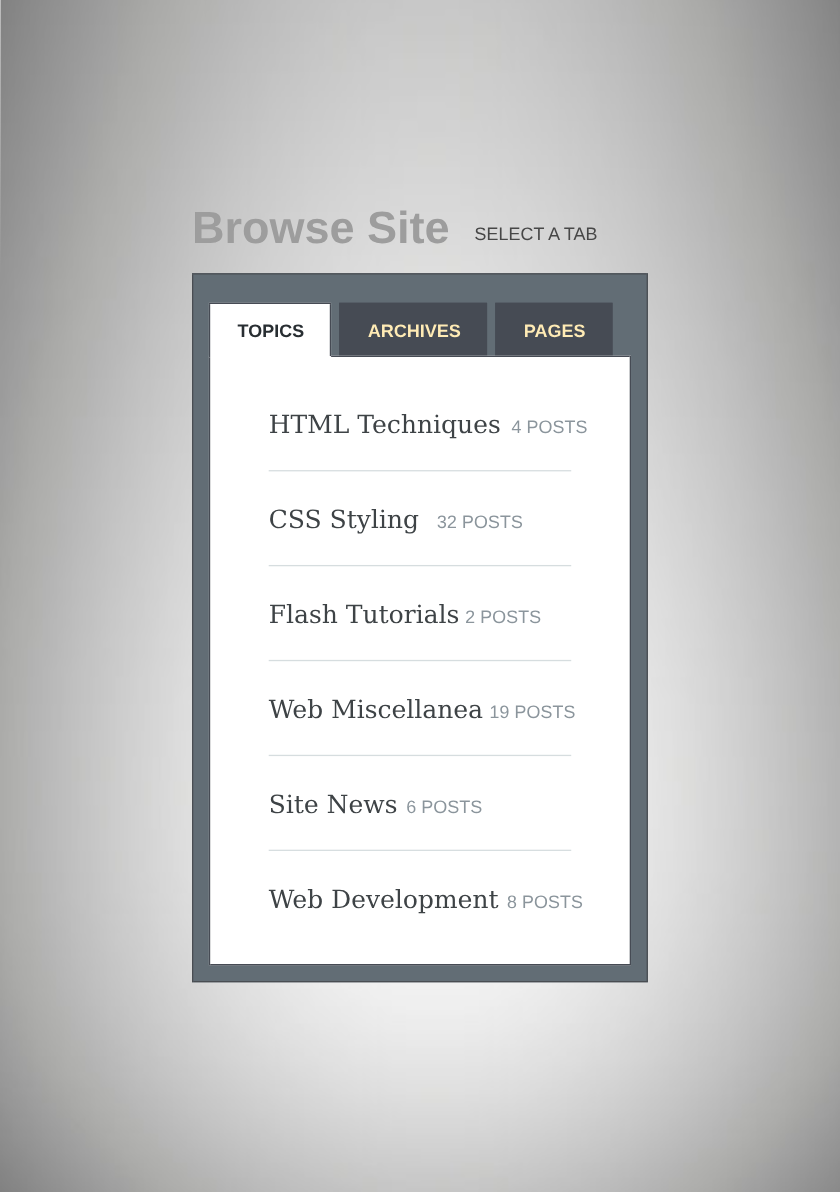
<style>
.page{position:relative;width:840px;height:1192px;background:#ffffff}
.page>*{position:absolute;margin:0}
.t1{font:45px "LiberationSans-Bold";color:#9d9d9d}
.t2{font:18px "LiberationSans";color:#474747}
.t3{font:18px "LiberationSans-Bold";color:#282e32}
.t4{font:18px "LiberationSans-Bold";color:#ffebb5}
.t5{font:25px "NotoSerif-Regular";color:#3e4346}
.t6{font:18px "LiberationSans";color:#8b959c}
</style>
<div class="page">
<p class="t1" style="left:195px;top:210px;width:254px;height:34px">Browse Site</p>
<p class="t2" style="left:475px;top:227px;width:122px;height:14px">SELECT A TAB</p>
<p class="t3" style="left:237px;top:324px;width:67px;height:14px">TOPICS</p>
<p class="t4" style="left:368px;top:324px;width:93px;height:14px">ARCHIVES</p>
<p class="t4" style="left:525px;top:324px;width:60px;height:14px">PAGES</p>
<p class="t5" style="left:270px;top:414px;width:230px;height:25px">HTML Techniques</p>
<p class="t6" style="left:511px;top:420px;width:76px;height:14px">4 POSTS</p>
<p class="t5" style="left:270px;top:509px;width:149px;height:25px">CSS Styling</p>
<p class="t6" style="left:437px;top:515px;width:86px;height:14px">32 POSTS</p>
<p class="t5" style="left:270px;top:604px;width:189px;height:20px">Flash Tutorials</p>
<p class="t6" style="left:466px;top:610px;width:75px;height:14px">2 POSTS</p>
<p class="t5" style="left:268px;top:699px;width:215px;height:20px">Web Miscellanea</p>
<p class="t6" style="left:490px;top:705px;width:85px;height:14px">19 POSTS</p>
<p class="t5" style="left:270px;top:794px;width:127px;height:20px">Site News</p>
<p class="t6" style="left:407px;top:800px;width:75px;height:14px">6 POSTS</p>
<p class="t5" style="left:268px;top:889px;width:231px;height:25px">Web Development</p>
<p class="t6" style="left:507px;top:895px;width:76px;height:14px">8 POSTS</p>
</div>
